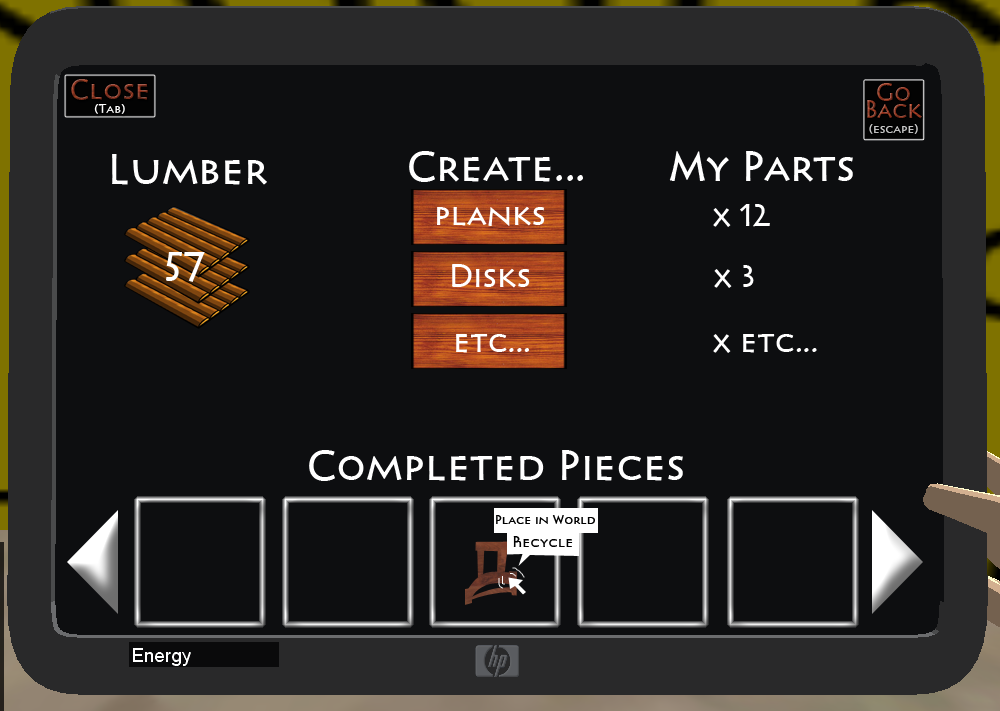
<style>
.page{position:relative;width:1000px;height:711px;background:#0d0e10}
.page>*{position:absolute;margin:0}
.t1{font:40px "Pericles";color:#ffffff}
.t2{font:30px "Pericles";color:#ffffff}
.t3{font:12px "Pericles";color:#000000}
.t4{font:14.1px "Pericles";color:#000000}
</style>
<div class="page">
<p class="t1" style="left:112px;top:154px;width:155px;height:31px">Lumber</p>
<p class="t1" style="left:409px;top:151px;width:174px;height:31px">Create...</p>
<p class="t1" style="left:669px;top:151px;width:184px;height:31px">My Parts</p>
<p class="t2" style="left:437px;top:206px;width:108px;height:20px">planks</p>
<p class="t2" style="left:713px;top:204px;width:57px;height:23px">x 12</p>
<p class="t1" style="left:166px;top:252px;width:39px;height:30px">57</p>
<p class="t2" style="left:452px;top:264px;width:78px;height:24px">Disks</p>
<p class="t2" style="left:714px;top:265px;width:40px;height:23px">x 3</p>
<p class="t2" style="left:456px;top:334px;width:73px;height:19px">etc...</p>
<p class="t2" style="left:713px;top:334px;width:104px;height:19px">x etc...</p>
<p class="t1" style="left:309px;top:450px;width:374px;height:31px">Completed Pieces</p>
<p class="t3" style="left:496px;top:515px;width:99px;height:9px">Place in World</p>
<p class="t4" style="left:513px;top:536px;width:60px;height:11px">Recycle</p>
</div>
